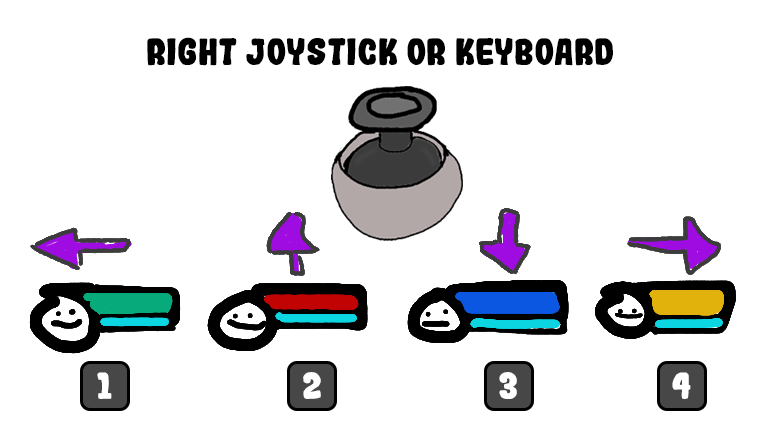
<style>
.page{position:relative;width:760px;height:427px;background:#ffffff}
.page>*{position:absolute;margin:0}
.t1{font:36px "Gogono-Cocoa-Mochi";color:#000000}
.t2{font:36px "Gogono-Cocoa-Mochi";color:#ffffff}
</style>
<div class="page">
<p class="t1" style="left:147px;top:37px;width:466px;height:29px">Right Joystick or Keyboard</p>
<p class="t2" style="left:97px;top:372px;width:15px;height:27px">1</p>
<p class="t2" style="left:303px;top:372px;width:18px;height:27px">2</p>
<p class="t2" style="left:499px;top:372px;width:18px;height:27px">3</p>
<p class="t2" style="left:672px;top:372px;width:19px;height:27px">4</p>
</div>
